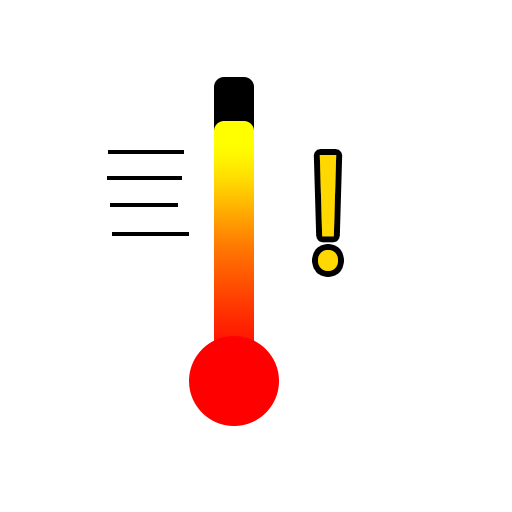
<style>
.page{position:relative;width:512px;height:512px;background:#ffffff}
.page>*{position:absolute;margin:0}
.t1{font:169.7px "MyriadPro-Regular";color:#ffd800}
</style>
<div class="page">
<p class="t1" style="left:318px;top:155px;width:20px;height:116px">!</p>
</div>
